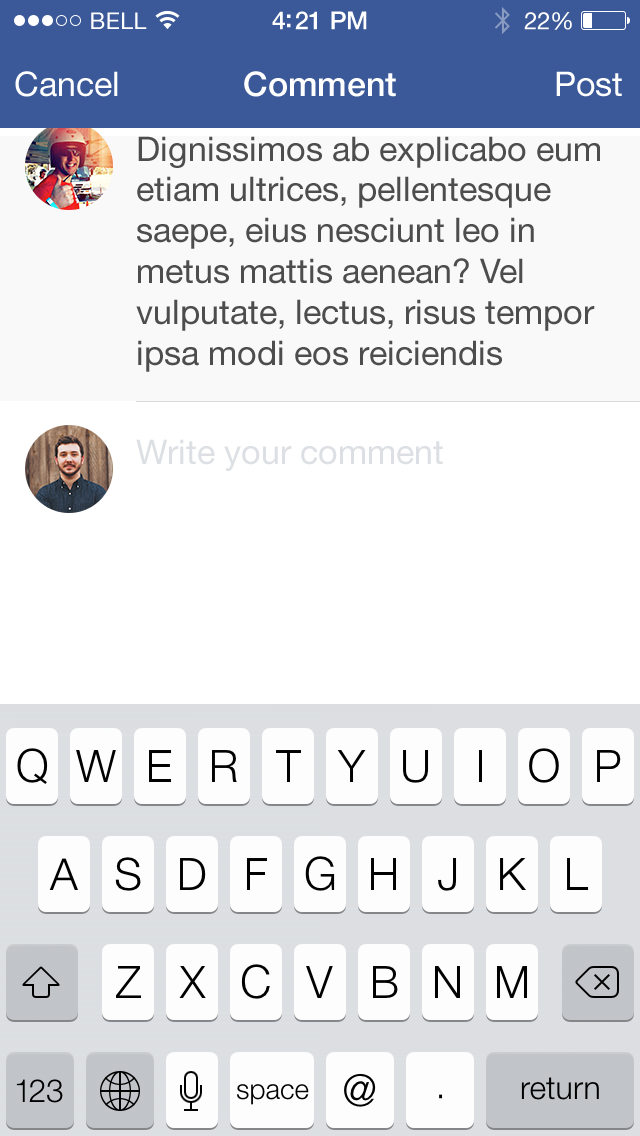
<style>
.page{position:relative;width:640px;height:1136px;background:#ffffff}
.page>*{position:absolute;margin:0}
.t1{font:23px "HelveticaNeue";letter-spacing:0.02em;color:#ffffff}
.t2{font:25px "HelveticaNeue-Medium";letter-spacing:-0.02em;color:#ffffff}
.t3{font:24px "HelveticaNeue";letter-spacing:-0.02em;color:#ffffff}
.t4{font:34px "HelveticaNeue";color:#ffffff}
.t5{font:34px "HelveticaNeue-Medium";color:#ffffff}
.t6{font:34px "HelveticaNeue";color:#4d4d4d}
.t7{font:34px "HelveticaNeue";color:#dcdfe3}
</style>
<div class="page">
<p class="t1" style="left:91px;top:12px;width:56px;height:17px">BELL</p>
<p class="t2" style="left:272px;top:11px;width:95px;height:19px">4:21 PM</p>
<p class="t3" style="left:524px;top:12px;width:48px;height:18px">22%</p>
<p class="t4" style="left:15px;top:71px;width:103px;height:26px">Cancel</p>
<p class="t5" style="left:244px;top:71px;width:152px;height:26px">Comment</p>
<p class="t4" style="left:556px;top:71px;width:66px;height:26px">Post</p>
<p class="t6" style="left:136px;top:136px;width:464px;height:236px">Dignissimos ab explicabo eum<br>etiam ultrices, pellentesque <br>saepe, eius nesciunt leo in <br>metus mattis aenean? Vel <br>vulputate, lectus, risus tempor <br>ipsa modi eos reiciendis</p>
<p class="t7" style="left:136px;top:439px;width:307px;height:32px">Write your comment</p>
</div>
